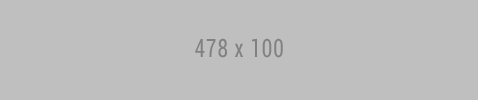
<style>
.page{position:relative;width:478px;height:100px;background:#bfbfbf}
.page>*{position:absolute;margin:0}
.t1{font:25px "Roboto-Condensed";letter-spacing:0.07em;color:#818181;scale:0.8 1}
</style>
<div class="page">
<p class="t1" style="left:195px;top:38px;width:88px;height:20px">478 x 100</p>
</div>
